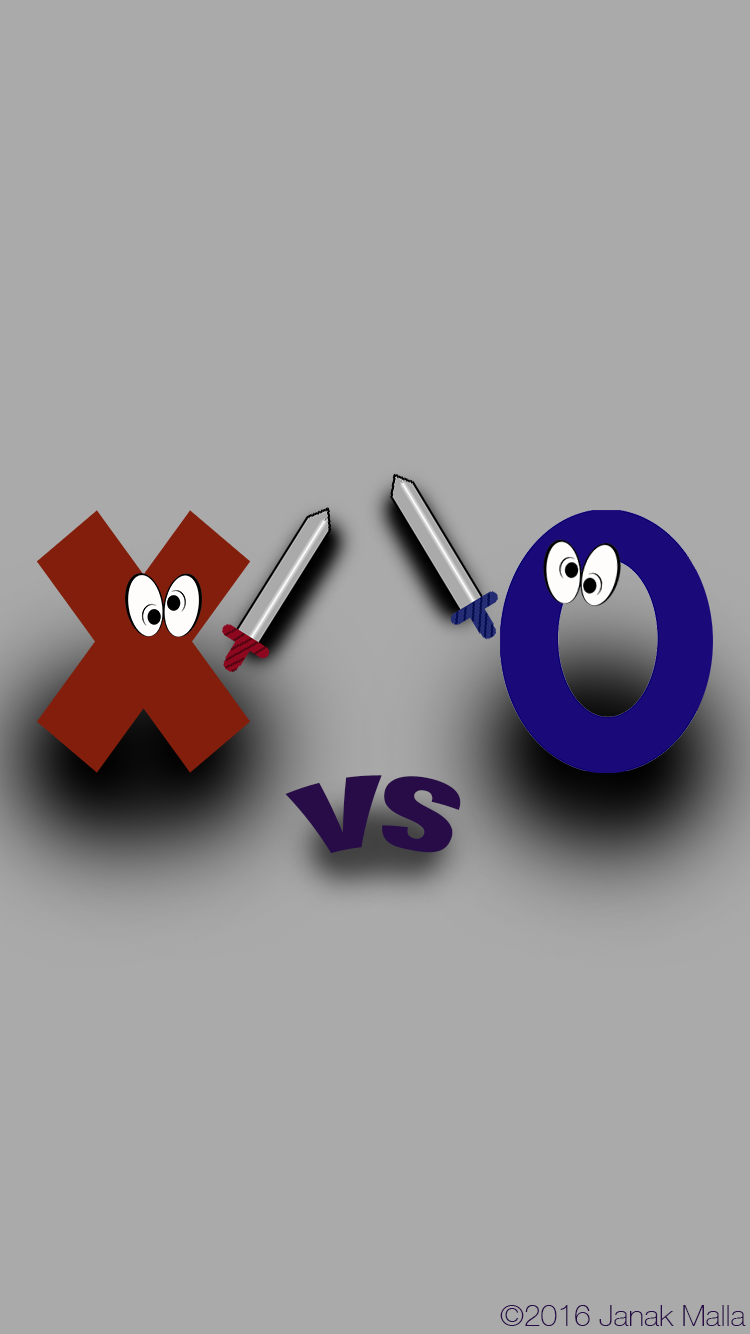
<style>
.page{position:relative;width:750px;height:1334px;background:#aaaaaa}
.page>*{position:absolute;margin:0}
.t1{font:100px "HelveticaNeue-CondensedBlack";color:#280c48}
.t2{font:30px "HelveticaNeue-Thin";color:#280c48}
</style>
<div class="page">
<p class="t1" style="left:285px;top:775px;width:176px;height:79px">VS</p>
<p class="t2" style="left:500px;top:1305px;width:246px;height:21px">©2016 Janak Malla</p>
</div>
